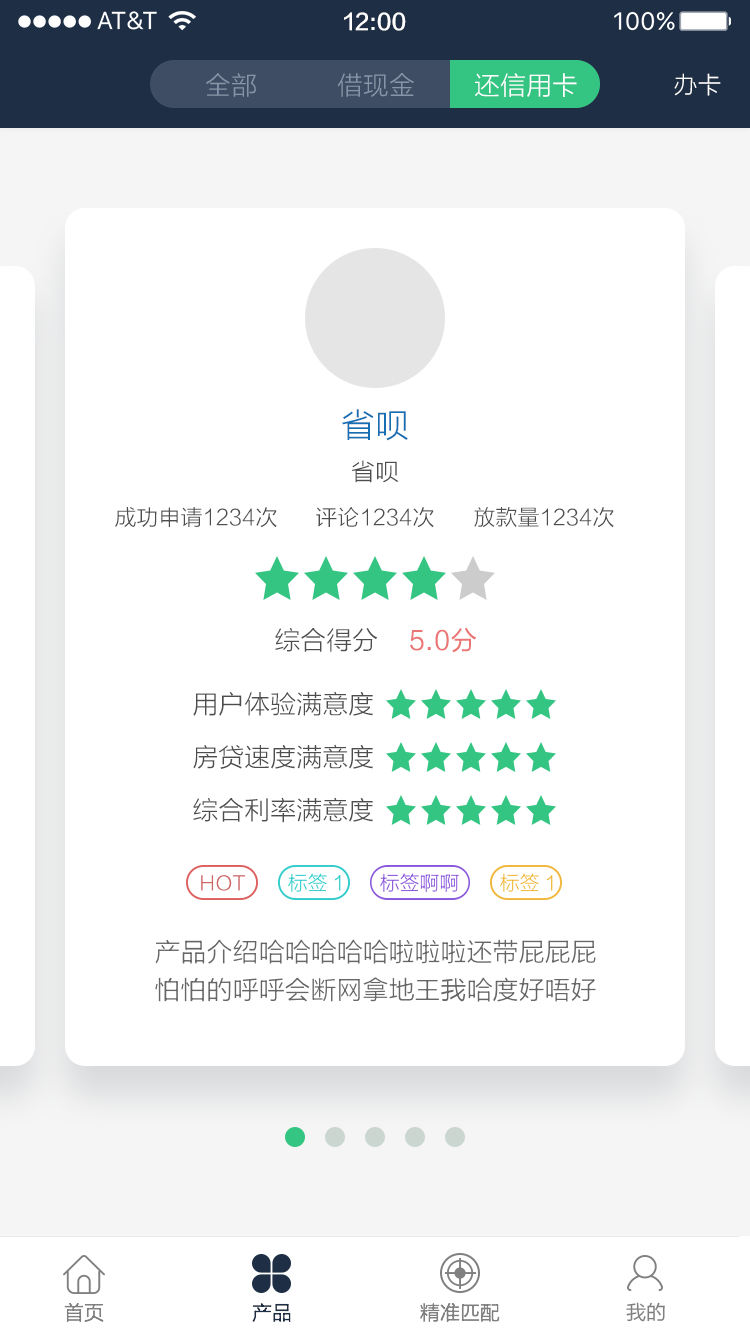
<style>
.page{position:relative;width:750px;height:1334px;background:#ffffff}
.page>*{position:absolute;margin:0}
.t1{font:22px "FZLTZHK--GBK1-0";color:#ffffff}
.t2{font:26px "FZLTXHK";color:#8895a8}
.t3{font:26px "FZLTXHK";color:#ffffff}
.t4{font:24px "FZLTXHK";color:#ffffff}
.t5{font:34px "FZLTXHK";color:#166eb3}
.t6{font:24px "FZLTXHK";color:#4d4d4d}
.t7{font:22px "FZLTXHK";color:#4d4d4d}
.t8{font:26px "FZLTXHK";color:#4d4d4d}
.t9{font:26px "FZLTXHK";color:#ea7575;font-weight:bold}
.t10{font:20px "FZLTXHK";color:#cc6666}
.t11{font:20px "FZLTXHK";color:#33cccc}
.t12{font:20px "FZLTXHK";color:#8857db}
.t13{font:20px "FZLTXHK";color:#f1b73c}
.t14{font:26px/38px "FZLTXHK";color:#666666}
.t15{font:20px "FZLTXHK";color:#808080}
.t16{font:20px "FZLTHK--GBK1-0";color:#808080}
.t17{font:20px "FZLTXHK";color:#1e2e45}
</style>
<div class="page">
<p class="t1" style="left:344px;top:12px;width:62px;height:19px">12:00</p>
<p class="t2" style="left:206px;top:73px;width:50px;height:24px">全部</p>
<p class="t2" style="left:337px;top:73px;width:77px;height:24px">借现金</p>
<p class="t3" style="left:475px;top:73px;width:102px;height:24px">还信用卡</p>
<p class="t4" style="left:674px;top:73px;width:47px;height:23px">办卡</p>
<p class="t5" style="left:342px;top:409px;width:66px;height:32px">省呗</p>
<p class="t6" style="left:351px;top:460px;width:47px;height:23px">省呗</p>
<p class="t7" style="left:115px;top:507px;width:162px;height:21px">成功申请1234次</p>
<p class="t7" style="left:316px;top:507px;width:118px;height:21px">评论1234次</p>
<p class="t7" style="left:474px;top:507px;width:140px;height:21px">放款量1234次</p>
<p class="t8" style="left:275px;top:628px;width:102px;height:24px">综合得分</p>
<p class="t9" style="left:410px;top:627px;width:66px;height:26px">5.0分</p>
<p class="t8" style="left:193px;top:691px;width:180px;height:25px">用户体验满意度</p>
<p class="t8" style="left:193px;top:744px;width:180px;height:25px">房贷速度满意度</p>
<p class="t8" style="left:193px;top:797px;width:180px;height:26px">综合利率满意度</p>
<p class="t10" style="left:201px;top:875px;width:45px;height:16px">HOT</p>
<p class="t11" style="left:288px;top:873px;width:53px;height:19px">标签1</p>
<p class="t12" style="left:380px;top:873px;width:79px;height:19px">标签啊啊</p>
<p class="t13" style="left:500px;top:873px;width:53px;height:19px">标签1</p>
<p class="t14" style="left:155px;top:939px;width:441px;height:63px">产品介绍哈哈哈哈哈啦啦啦还带屁屁屁<br>怕怕的呼呼会断网拿地王我哈度好唔好</p>
<p class="t15" style="left:64px;top:1302px;width:40px;height:20px">首页</p>
<p class="t16" style="left:626px;top:1302px;width:39px;height:20px">我的</p>
<p class="t17" style="left:252px;top:1303px;width:39px;height:19px">产品</p>
<p class="t15" style="left:420px;top:1303px;width:80px;height:19px">精准匹配</p>
</div>
